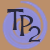
<style>
.page{position:relative;width:50px;height:50px;background:#bb8f6a}
.page>*{position:absolute;margin:0}
.t1{font:25.7px "CelticHand";color:#29283d}
.t2{font:20px "CelticHand";color:#29283d}
</style>
<div class="page">
<p class="t1" style="left:7px;top:9px;width:17px;height:21px">T</p>
<p class="t1" style="left:19px;top:15px;width:15px;height:21px">P</p>
<p class="t2" style="left:28px;top:26px;width:13px;height:16px">2</p>
</div>
